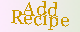
<style>
.page{position:relative;width:80px;height:32px}
.page>*{position:absolute;margin:0}
.t1{font:19.1px "Georgia";color:#cc9900}
</style>
<div class="page">
<p class="t1" style="left:11px;top:1px;width:58px;height:29px;rotate:3deg">Add Recipe</p>
</div>
